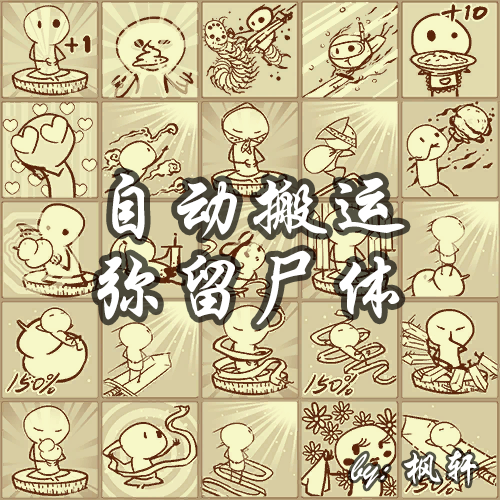
<style>
.page{position:relative;width:500px;height:500px}
.page>*{position:absolute;margin:0}
.t1{font:80px/80px "STXingkai";color:#ffffff}
.t2{font:40px "STXingkai";color:#ffffff}
</style>
<div class="page">
<p class="t1" style="left:97px;top:173px;width:308px;height:152px;text-align:center">自动搬运<br>弥留尸体</p>
<p class="t2" style="left:351px;top:450px;width:126px;height:39px">by: 枫轩</p>
</div>
